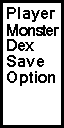
<style>
.page{position:relative;width:64px;height:128px;background:#ffffff}
.page>*{position:absolute;margin:0}
.t1{font:16px "Kartika-Bold";color:#000000}
.t2{font:16px "Kartika-Bold";letter-spacing:-0.1em;color:#000000}
</style>
<div class="page">
<p class="t1" style="left:7px;top:7px;width:48px;height:15px">Player</p>
<p class="t2" style="left:7px;top:24px;width:52px;height:12px">Monster</p>
<p class="t2" style="left:7px;top:39px;width:27px;height:12px">Dex</p>
<p class="t1" style="left:7px;top:55px;width:37px;height:12px">Save</p>
<p class="t1" style="left:7px;top:71px;width:48px;height:15px">Option</p>
</div>
